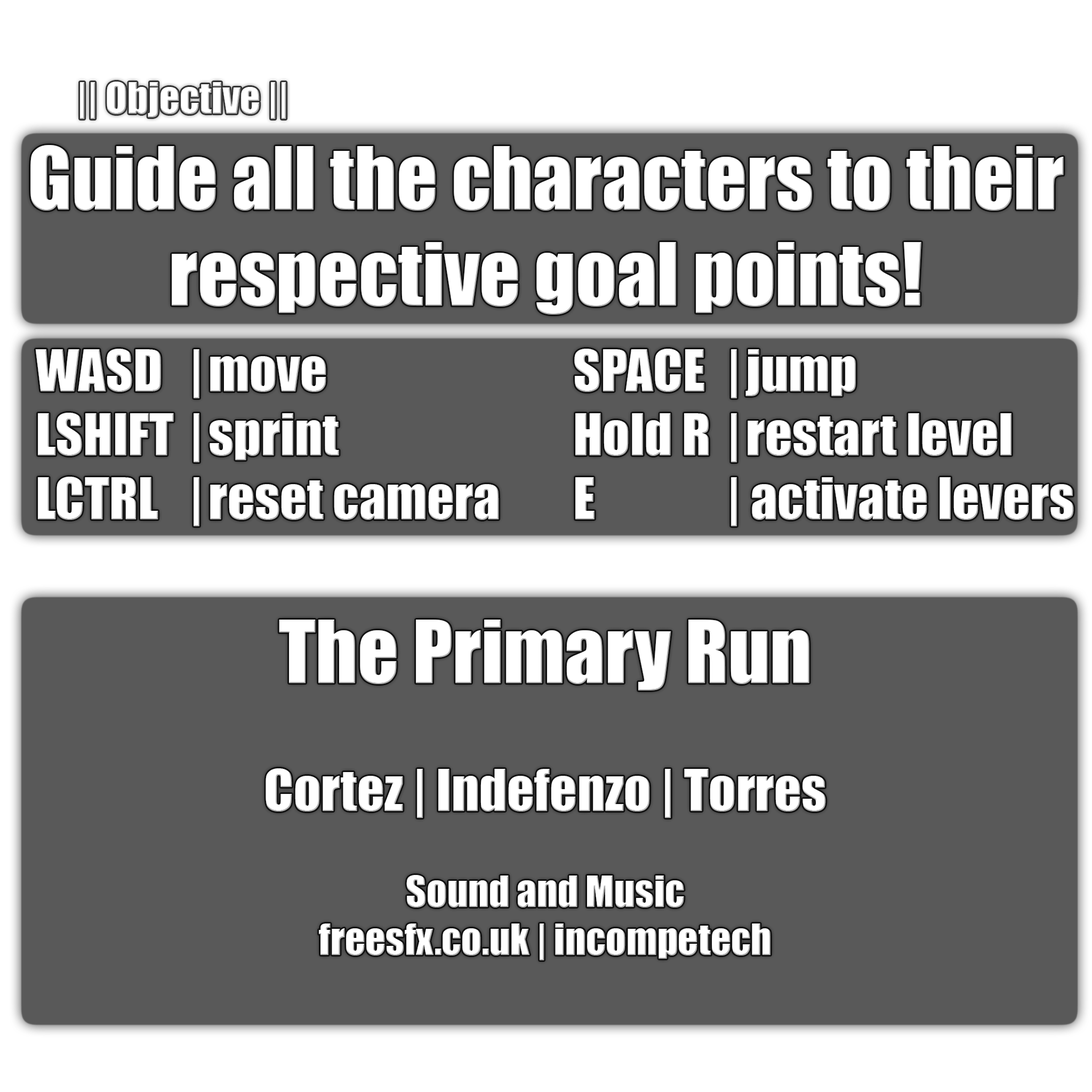
<style>
.page{position:relative;width:1092px;height:1092px;background:#595959}
.page>*{position:absolute;margin:0}
.t1{font:80px "Impact";color:#ffffff}
.t2{font:40px "Impact";color:#ffffff}
.t3{font:53.3px "Impact";color:#ffffff}
</style>
<div class="page">
<p class="t1" style="left:30px;top:82px;width:1034px;height:233px"><span class="t2">    || Objective ||<br></span>Guide all the characters to their<br>respective goal points!</p>
<p class="t3" style="left:35px;top:349px;width:1039px;height:177px">WASD  | move             SPACE  | jump<br>LSHIFT | sprint             Hold R | restart level<br>LCTRL  | reset camera    E       | activate levers</p>
<p class="t2" style="left:266px;top:620px;width:560px;height:340px;text-align:center"><span class="t1">The Primary Run<br></span><span class="t3"><br>Cortez | Indefenzo | Torres<br></span><br>Sound and Music<br>freesfx.co.uk | incompetech</p>
</div>
